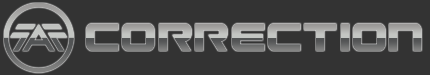
<style>
.page{position:relative;width:430px;height:75px;background:#333333}
.page>*{position:absolute;margin:0}
.t1{font:48px "GunshipCondensed"}
</style>
<div class="page">
<p class="t1" style="left:86px;top:23px;width:336px;height:28px">correction</p>
</div>
